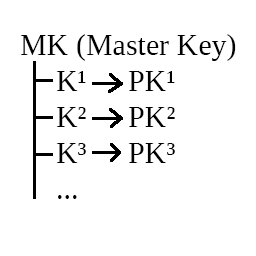
<style>
.page{position:relative;width:256px;height:256px;background:#ffffff}
.page>*{position:absolute;margin:0}
.t1{font:30px "LiberationSerif";color:#000000}
</style>
<div class="page">
<p class="t1" style="left:20px;top:34px;width:216px;height:165px">MK (Master Key)<br> K¹  PK¹<br> K²  PK²<br> K³  PK³<br> ...</p>
</div>
